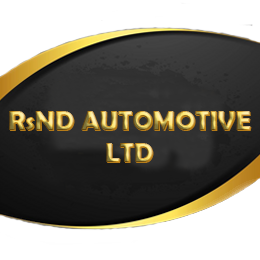
<style>
.page{position:relative;width:260px;height:260px;background:#ffffff}
.page>*{position:absolute;margin:0}
.t1{font:27.1px "BerlinSansFBDemi-Bold";color:#fee45e}
.t2{font:27.1px "BerlinSansFBDemi-Bold";color:#b57b19}
</style>
<div class="page">
<p class="t1" style="left:9px;top:111px;width:242px;height:19px">RsND AUTOMOTIVE</p>
<p class="t2" style="left:10px;top:112px;width:242px;height:19px">RsND AUTOMOTIVE</p>
<p class="t1" style="left:106px;top:143px;width:47px;height:19px">LTD</p>
<p class="t2" style="left:107px;top:144px;width:47px;height:19px">LTD</p>
</div>
